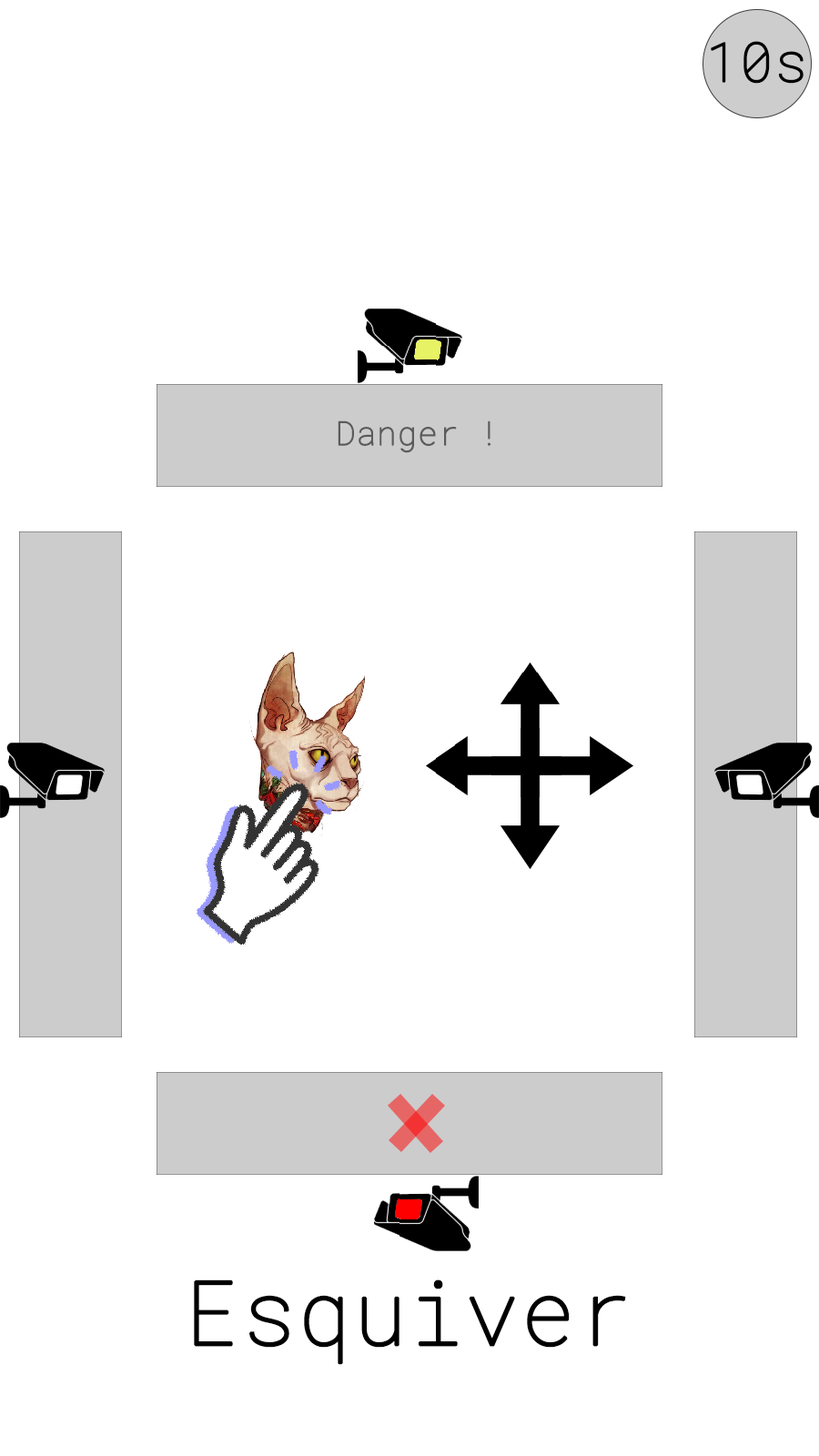
<style>
.page{position:relative;width:819px;height:1456px;background:#ffffff}
.page>*{position:absolute;margin:0}
.t1{font:32.8px "RobotoMono-Thin";color:#5b5b5b;font-weight:bold}
.t2{font:89.1px "RobotoMono-Thin";color:#000000;font-weight:bold}
</style>
<div class="page">
<p class="t1" style="left:338px;top:420px;width:152px;height:33px">Danger !</p>
<p class="t2" style="left:194px;top:1279px;width:432px;height:86px">Esquiver</p>
</div>
